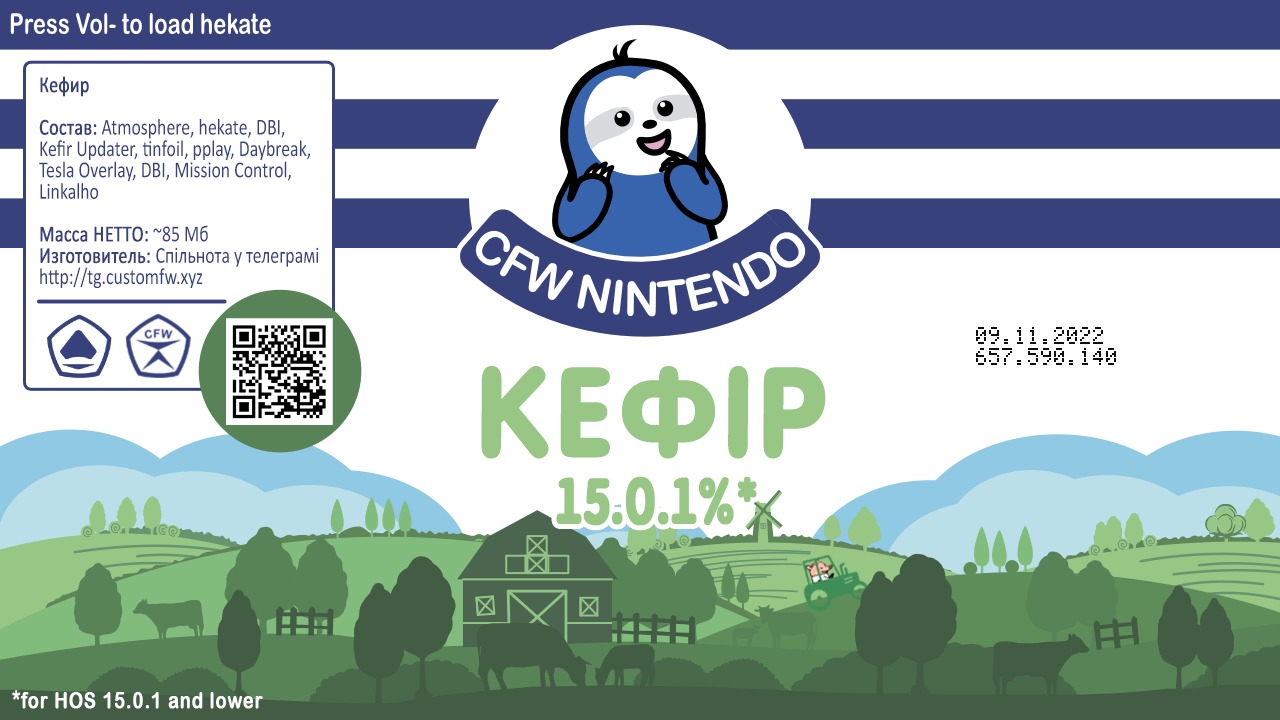
<style>
.page{position:relative;width:1280px;height:720px;background:#ffffff}
.page>*{position:absolute;margin:0}
.t1{font:23.1px "Calibri";color:#37417c;scale:0.77 1}
.t2{font:23.1px "Calibri";color:#37417c;font-weight:bold;scale:0.77 1}
.t3{font:23.1px "DotMatrixNormal";color:#140d0d;font-weight:bold;scale:0.77 1}
.t4{font:151.3px "aMavickFont";letter-spacing:-0.1em;color:#97c685;font-weight:bold;scale:0.93 1}
.t5{font:75.9px "aMavickFont";letter-spacing:-0.1em;color:#97c685;font-weight:bold;scale:0.77 1}
.t6{font:23.4px "ArialRoundedMTBold";color:#ffffff;font-weight:bold;scale:0.77 1}
</style>
<div class="page">
<p class="t1" style="left:39px;top:76px;width:280px;height:212px"><span class="t2">Кефир<br><br>Состав:</span> Atmosphere, hekate, DBI,  Kefir Updater, tinfoil, pplay, Daybreak, Tesla Overlay, DBI, Mission Control, Linkalho<br><br><span class="t2">Масса НЕТТО:</span> ~85 Мб<br><span class="t2">Изготовитель: </span>Спільнота у телеграмі http://tg.customfw.xyz</p>
<p class="t3" style="left:976px;top:327px;width:140px;height:38px">09.11.2022<br>657.590.140</p>
<p class="t4" style="left:481px;top:366px;width:345px;height:93px">КЕФIР</p>
<p class="t5" style="left:556px;top:476px;width:201px;height:50px">15.0.1%*</p>
<p class="t6" style="left:12px;top:690px;width:251px;height:19px">*for HOS 15.0.1 and lower</p>
</div>
